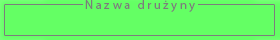
<style>
.page{position:relative;width:280px;height:40px;background:#64ff64}
.page>*{position:absolute;margin:0}
.t1{font:12.5px "MyriadPro-Regular";letter-spacing:0.2em;color:#7c7c7c}
</style>
<div class="page">
<p class="t1" style="left:85px;top:0px;width:110px;height:12px">Nazwa drużyny</p>
</div>
